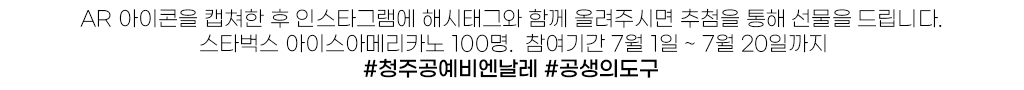
<style>
.page{position:relative;width:1024px;height:90px;background:#ffffff}
.page>*{position:absolute;margin:0}
.t1{font:20.8px/25px "GmarketSansLight";color:#000000}
.t2{font:20.8px/25px "GmarketSansMedium";color:#000000}
</style>
<div class="page">
<p class="t1" style="left:80px;top:8px;width:862px;height:70px;text-align:center">AR 아이콘을 캡쳐한 후 인스타그램에 해시태그와 함께 올려주시면 추첨을 통해 선물을 드립니다. <br>스타벅스 아이스아메리카노 100명.  참여기간 7월 1일 ~ 7월 20일까지<br><span class="t2">#청주공예비엔날레 #공생의도구</span></p>
</div>
